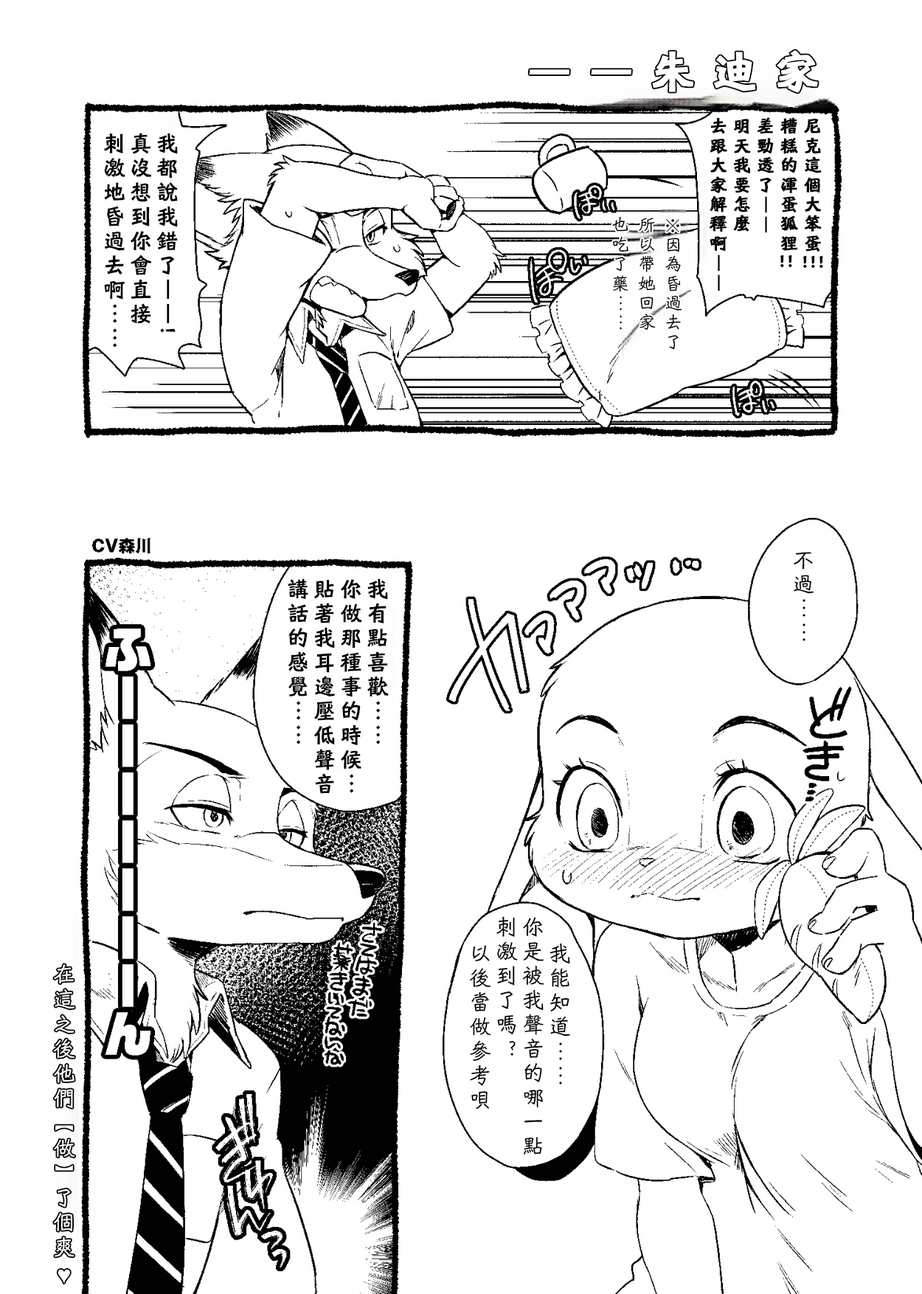
<style>
.page{position:relative;width:922px;height:1294px;background:#ffffff}
.page>*{position:absolute;margin:0}
.t1{font:17.7px/23.6px "HYShiWei75U";letter-spacing:0.1em;color:#000000;font-weight:bold}
.t2{font:22.1px/26.5px "HYShiWei75U";letter-spacing:0.1em;color:#000000}
.t3{font:17.7px/26.5px "HYShiWei55U";letter-spacing:0.1em;color:#000000}
.t4{font:17.7px/26.5px "AdobeHeitiStd-Regular";letter-spacing:0.1em;color:#000000}
.t5{font:17.7px "HYShiWei75U";letter-spacing:0.1em;color:#000000;font-weight:bold}
.t6{font:22.1px/23.6px "HYShiWei55U";letter-spacing:0.1em;color:#000000}
.t7{font:22.1px/26.5px "HYShiWei55U";letter-spacing:0.1em;color:#000000}
</style>
<div class="page">
<p class="t1" style="left:709px;top:117px;width:113px;height:174px">尼克這個大笨蛋<br>糟糕的渾蛋狐狸<br>差勁透了——<br>明天我要怎麼<br>去跟大家解釋啊——</p>
<p class="t2" style="left:104px;top:133px;width:74px;height:214px">我都說我錯了——!<br>真沒想到你會直接<br>刺激地昏過去啊……</p>
<p class="t3" style="left:612px;top:216px;width:70px;height:134px"><span class="t4">※</span>因為昏過去了<br>所以帶她回家<br>也吃了藥……</p>
<p class="t5" style="left:780px;top:254px;width:12px;height:14px">!!</p>
<p class="t5" style="left:802px;top:255px;width:21px;height:13px">!!!</p>
<p class="t6" style="left:794px;top:552px;width:19px;height:89px">不過……</p>
<p class="t2" style="left:288px;top:578px;width:101px;height:216px">我有點喜歡……<br>你做那種事的時候…<br>貼著我耳邊壓低聲音<br>講話的感覺……</p>
<p class="t7" style="left:469px;top:916px;width:101px;height:238px">我能知道……<br>你是被我聲音的哪一點<br>刺激到了嗎？<br>    以後當做參考唄</p>
</div>
